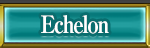
<style>
.page{position:relative;width:150px;height:48px}
.page>*{position:absolute;margin:0}
.t1{font:24px "RyuminPro-ExBold";letter-spacing:-0.08em;color:#ffffff;scale:0.9 1}
</style>
<div class="page">
<p class="t1" style="left:41px;top:15px;width:68px;height:19px">Echelon</p>
</div>
